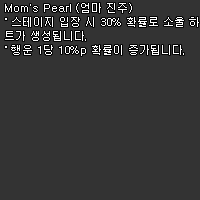
<style>
.page{position:relative;width:200px;height:200px;background:#333333}
.page>*{position:absolute;margin:0}
.t1{font:11px/14px "Dotum";color:#ffffff}
</style>
<div class="page">
<p class="t1" style="left:5px;top:3px;width:194px;height:53px">Mom's Pearl (엄마 진주)<br>˚ 스테이지 입장 시 30% 확률로 소울 하<br>트가 생성됩니다.<br>˚ 행운 1당 10%p 확률이 증가됩니다.</p>
</div>
